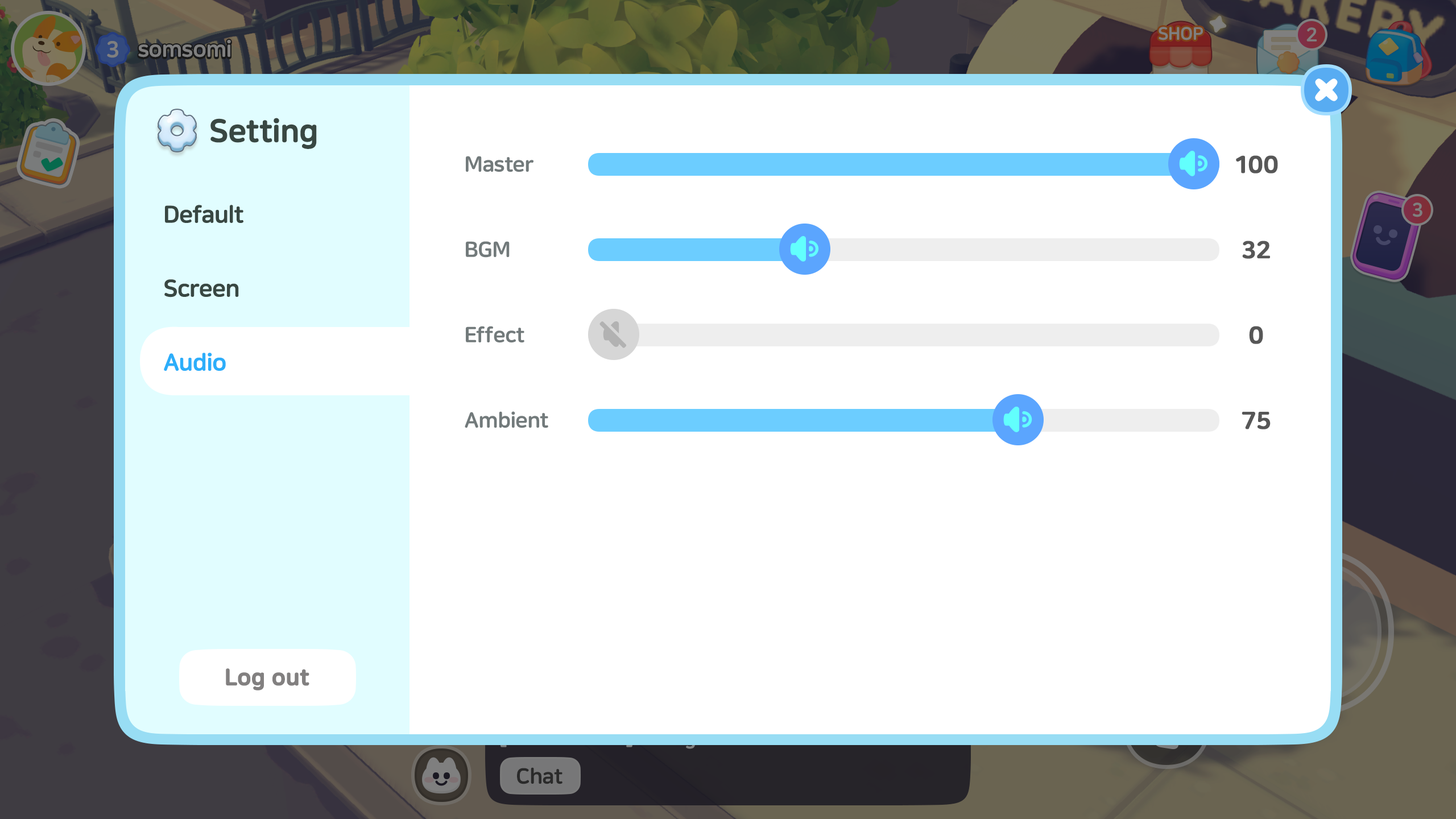
<style>
.page{position:relative;width:1456px;height:819px;background:#ffffff}
.page>*{position:absolute;margin:0}
.t1{font:31.8px "NanumSquareRoundOTFEB";letter-spacing:-0.02em;color:#384742;font-weight:bold}
.t2{font:21.6px "NanumSquareRoundOTFEB";letter-spacing:-0.02em;color:#727a7b}
.t3{font:23.9px "NanumSquareRoundOTFEB";color:#575757;font-weight:bold}
.t4{font:23.9px "NanumSquareRoundOTFEB";letter-spacing:-0.02em;color:#384742}
.t5{font:23.9px "NanumSquareRoundOTFEB";letter-spacing:-0.02em;color:#2caefa}
.t6{font:22.7px "NanumSquareRoundOTFEB";letter-spacing:-0.01em;color:#828080;font-weight:bold}
</style>
<div class="page">
<p class="t1" style="left:210px;top:118px;width:107px;height:31px">Setting</p>
<p class="t2" style="left:466px;top:156px;width:67px;height:16px">Master</p>
<p class="t3" style="left:1236px;top:155px;width:42px;height:18px">100</p>
<p class="t4" style="left:165px;top:205px;width:78px;height:18px">Default</p>
<p class="t2" style="left:466px;top:241px;width:44px;height:17px">BGM</p>
<p class="t3" style="left:1242px;top:241px;width:28px;height:18px">32</p>
<p class="t4" style="left:164px;top:279px;width:75px;height:18px">Screen</p>
<p class="t2" style="left:466px;top:326px;width:58px;height:17px">Effect</p>
<p class="t3" style="left:1249px;top:326px;width:14px;height:18px">0</p>
<p class="t5" style="left:164px;top:353px;width:62px;height:18px">Audio</p>
<p class="t2" style="left:465px;top:411px;width:83px;height:17px">Ambient</p>
<p class="t3" style="left:1242px;top:412px;width:29px;height:17px">75</p>
<p class="t6" style="left:226px;top:668px;width:83px;height:22px">Log out</p>
</div>
